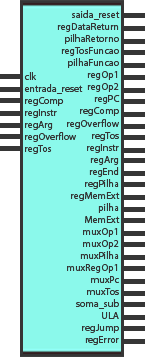
<style>
.page{position:relative;width:145px;height:357px;background:#8bf9eb}
.page>*{position:absolute;margin:0}
.t1{font:10px "MyriadHebrew-Regular";color:#363636}
</style>
<div class="page">
<p class="t1" style="left:57px;top:10px;width:63px;height:335px">saida_reset<br>regDataReturn<br>pilhaRetorno<br>regTosFuncao<br>pilhaFuncao<br>regOp1<br>regOp2<br>regPC<br>regComp<br>regOverflow<br>regTos<br>regInstr<br>regArg<br>regEnd<br>regPilha<br>regMemExt<br>pilha<br>MemExt<br>muxOp1<br>muxOp2<br>muxPilha<br>muxRegOp1<br>muxPc<br>muxTos<br>soma_sub<br>ULA<br>regJump<br>regError</p>
<p class="t1" style="left:24px;top:72px;width:59px;height:82px;text-align:right">clk<br>entrada_reset<br>regComp<br>regInstr<br>regArg<br>regOverflow<br>regTos</p>
</div>
